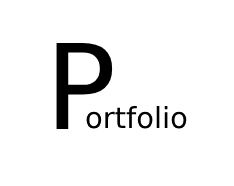
<style>
.page{position:relative;width:234px;height:186px;background:#ffffff}
.page>*{position:absolute;margin:0}
.t1{font:118px "DejaVuSans";color:#000000}
.t2{font:29px "DejaVuSans";color:#000000}
</style>
<div class="page">
<p class="t1" style="left:56px;top:42px;width:57px;height:87px">P</p>
<p class="t2" style="left:86px;top:105px;width:101px;height:24px">ortfolio</p>
</div>
